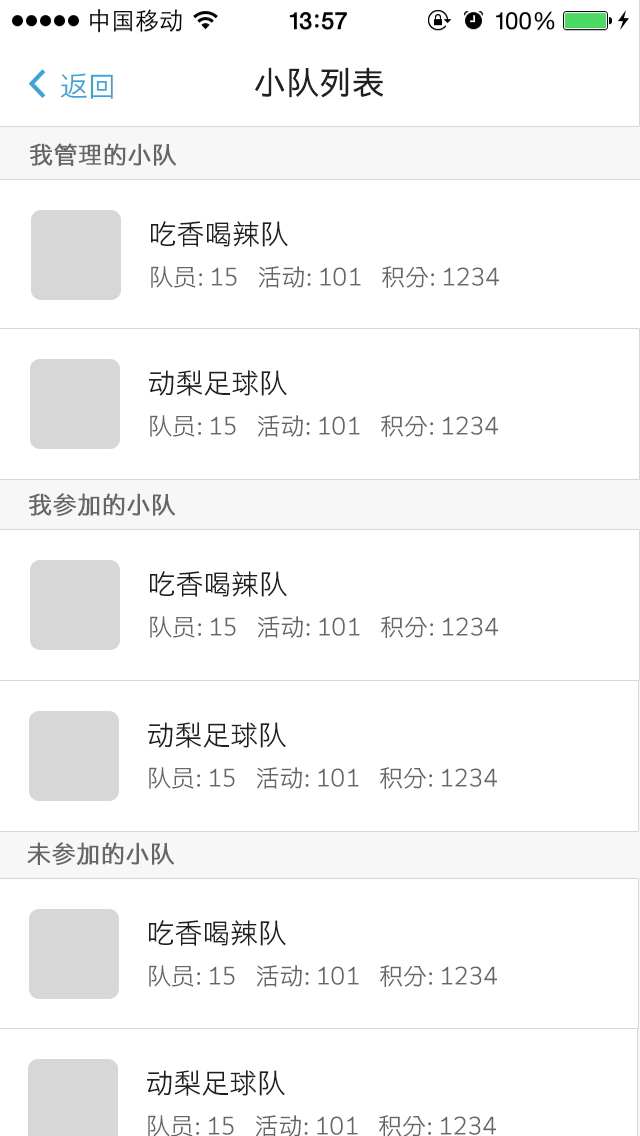
<style>
.page{position:relative;width:640px;height:1136px;background:#ffffff}
.page>*{position:absolute;margin:0}
.t1{font:28px "STHeitiSC-Light";color:#3ba2e0}
.t2{font:32px "STHeitiSC-Light";color:#202020;font-weight:bold}
.t3{font:24px "STHeitiSC-Light";color:#666666;font-weight:bold}
.t4{font:27.8px "STHeitiSC-Light";color:#202020}
.t5{font:23.9px "STHeitiSC-Light";color:#666666}
</style>
<div class="page">
<p class="t1" style="left:60px;top:73px;width:53px;height:26px">返回</p>
<p class="t2" style="left:255px;top:67px;width:128px;height:31px">小队列表</p>
<p class="t3" style="left:30px;top:143px;width:146px;height:23px">我管理的小队</p>
<p class="t4" style="left:151px;top:221px;width:137px;height:26px">吃香喝辣队</p>
<p class="t5" style="left:151px;top:266px;width:348px;height:22px">队员: 15    活动: 101    积分: 1234</p>
<p class="t4" style="left:149px;top:370px;width:138px;height:26px">动梨足球队</p>
<p class="t5" style="left:150px;top:415px;width:348px;height:22px">队员: 15    活动: 101    积分: 1234</p>
<p class="t3" style="left:29px;top:493px;width:146px;height:23px">我参加的小队</p>
<p class="t4" style="left:150px;top:571px;width:137px;height:26px">吃香喝辣队</p>
<p class="t5" style="left:150px;top:616px;width:348px;height:22px">队员: 15    活动: 101    积分: 1234</p>
<p class="t4" style="left:148px;top:722px;width:138px;height:26px">动梨足球队</p>
<p class="t5" style="left:149px;top:767px;width:348px;height:22px">队员: 15    活动: 101    积分: 1234</p>
<p class="t3" style="left:27px;top:842px;width:147px;height:23px">未参加的小队</p>
<p class="t4" style="left:149px;top:920px;width:137px;height:26px">吃香喝辣队</p>
<p class="t5" style="left:149px;top:965px;width:348px;height:22px">队员: 15    活动: 101    积分: 1234</p>
<p class="t4" style="left:147px;top:1070px;width:138px;height:26px">动梨足球队</p>
<p class="t5" style="left:148px;top:1115px;width:348px;height:22px">队员: 15    活动: 101    积分: 1234</p>
</div>
